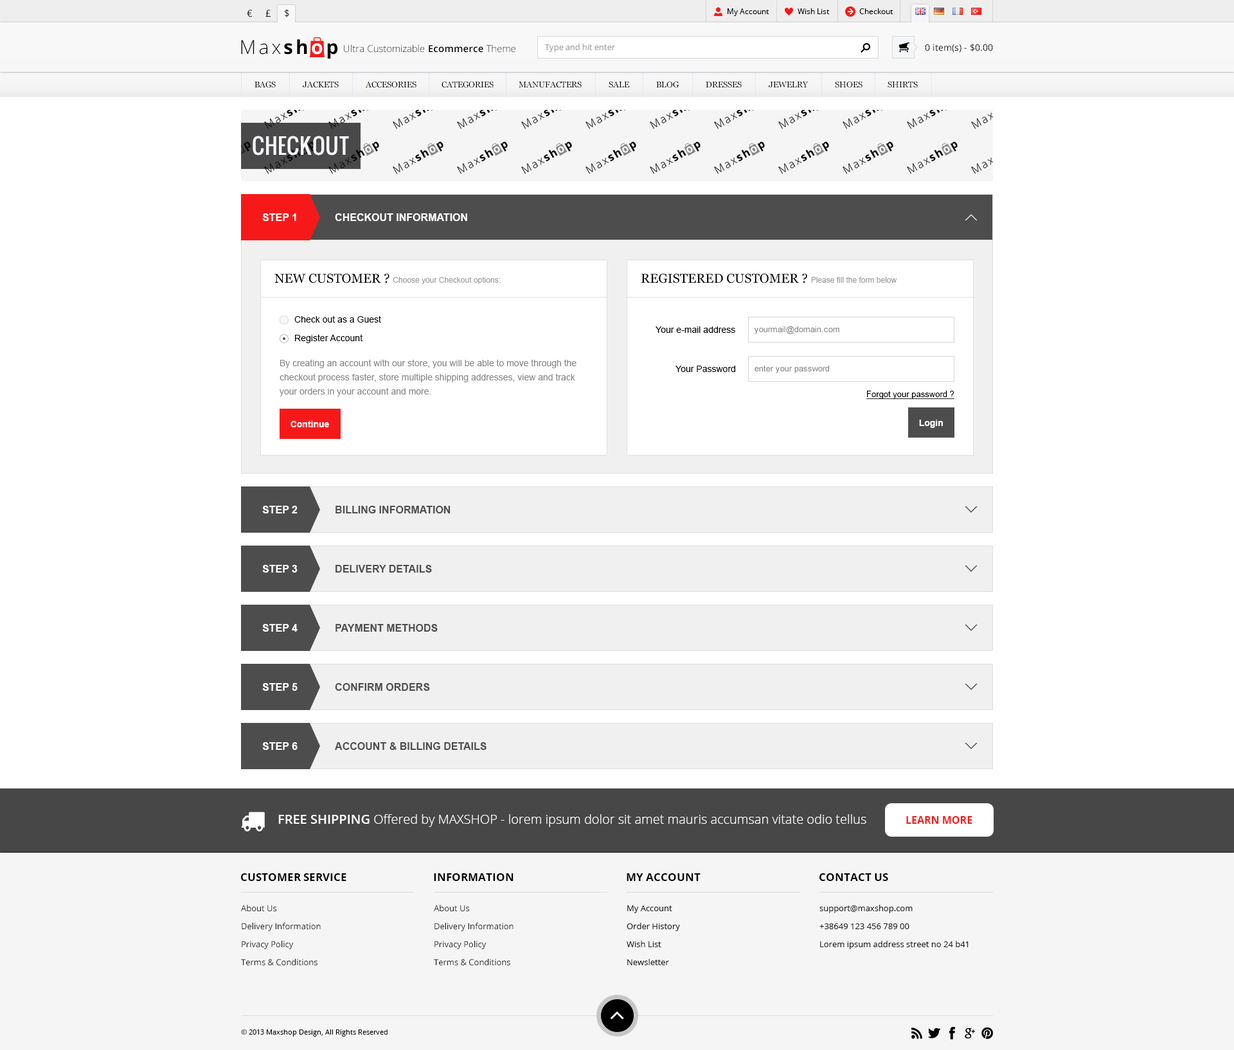
<style>
.page{position:relative;width:1234px;height:1050px;background:#ffffff}
.page>*{position:absolute;margin:0}
.t1{font:9.6px "OpenSans";color:#000000}
.t2{font:7.7px "OpenSans";color:#000000}
.t3{font:19.3px "OpenSans-Light";letter-spacing:0.14em;color:#000000}
.t4{font:19.3px "OpenSans-Bold";letter-spacing:0.14em;color:#000000}
.t5{font:19.3px "OpenSans-Bold";letter-spacing:0.14em;color:#f6f6fa}
.t6{font:9.6px "OpenSans-Light";color:#000000}
.t7{font:9.6px "OpenSans-Semibold";color:#000000}
.t8{font:8.4px "OpenSans";color:#a2a2a2}
.t9{font:9px "OpenSans";color:#000000}
.t10{font:8.4px "Georgia";color:#000000;text-transform:uppercase}
.t11{font:21.2px "Oswald";color:#f5f6fb}
.t12{font:10.3px "Arial-BoldMT";color:#ffffff;text-transform:uppercase}
.t13{font:7.7px "ArialMT";color:#9d9d9d}
.t14{font:12.9px "Georgia";color:#000000;text-transform:uppercase}
.t15{font:9px "ArialMT";color:#000000}
.t16{font:8.4px "ArialMT";color:#808080}
.t17{font:9px/14.1px "ArialMT";color:#8a8a8a}
.t18{font:8.4px "ArialMT";color:#000000;text-decoration:underline}
.t19{font:9px "Arial-BoldMT";color:#ffffff}
.t20{font:10.3px "Arial-BoldMT";color:#4d4d4d;text-transform:uppercase}
.t21{font:12.9px "OpenSans-Light";color:#ffffff}
.t22{font:12.9px "OpenSans-Semibold";color:#ffffff}
.t23{font:10.3px "OpenSans-Bold";color:#f71919;text-transform:uppercase}
.t24{font:10.9px "OpenSans-Bold";color:#000000;text-transform:uppercase}
.t25{font:8.4px/18px "OpenSans";color:#1c1c1c}
.t26{font:7.1px "OpenSans";color:#000000}
</style>
<div class="page">
<p class="t1" style="left:247px;top:9px;width:42px;height:8px">€     £     $</p>
<p class="t2" style="left:728px;top:8px;width:41px;height:8px">My Account</p>
<p class="t2" style="left:798px;top:8px;width:32px;height:6px">Wish List</p>
<p class="t2" style="left:859px;top:8px;width:35px;height:6px">Checkout</p>
<p class="t3" style="left:241px;top:39px;width:97px;height:20px">Max<span class="t4">sh</span><span class="t5">o</span><span class="t4">p</span></p>
<p class="t6" style="left:344px;top:44px;width:172px;height:9px">Ultra Customizable <span class="t7">Ecommerce</span> Theme</p>
<p class="t8" style="left:544px;top:44px;width:71px;height:8px">Type and hit enter</p>
<p class="t9" style="left:925px;top:44px;width:68px;height:9px">0 item(s) - $0.00</p>
<p class="t10" style="left:255px;top:81px;width:663px;height:7px">BAGS              Jackets              ACCESORIES             CATEGORIES             Manufacters              Sale              Blog              Dresses              Jewelry              SHOES             SHirts</p>
<p class="t11" style="left:253px;top:136px;width:96px;height:20px">CHECKOUT</p>
<p class="t12" style="left:262px;top:213px;width:34px;height:8px">sTEP 1</p>
<p class="t12" style="left:335px;top:213px;width:132px;height:8px">cHECKOUT iNFORMATION</p>
<p class="t13" style="left:274px;top:273px;width:227px;height:11px"><span class="t14">New Customer ? </span>Choose your Checkout options:</p>
<p class="t13" style="left:642px;top:273px;width:255px;height:10px"><span class="t14">Registered Customer ? </span>Please fill the form below</p>
<p class="t15" style="left:294px;top:316px;width:87px;height:7px">Check out as a Guest</p>
<p class="t15" style="left:656px;top:327px;width:79px;height:6px">Your e-mail address</p>
<p class="t16" style="left:754px;top:326px;width:86px;height:8px">yourmail@domain.com</p>
<p class="t15" style="left:295px;top:334px;width:68px;height:9px">Register Account</p>
<p class="t17" style="left:279px;top:359px;width:298px;height:38px">By creating an account with our store, you will be able to move through the checkout process faster, store multiple shipping addresses, view and track your orders in your account and more.</p>
<p class="t15" style="left:676px;top:366px;width:59px;height:6px">Your Password</p>
<p class="t16" style="left:755px;top:365px;width:74px;height:8px">enter your password</p>
<p class="t18" style="left:867px;top:391px;width:88px;height:8px">Forgot your password ?</p>
<p class="t19" style="left:291px;top:421px;width:38px;height:6px">Continue</p>
<p class="t19" style="left:919px;top:420px;width:24px;height:8px">Login</p>
<p class="t12" style="left:262px;top:506px;width:36px;height:8px">sTEP 2</p>
<p class="t20" style="left:336px;top:506px;width:115px;height:8px">Billing Information</p>
<p class="t12" style="left:262px;top:565px;width:36px;height:8px">sTEP 3</p>
<p class="t20" style="left:336px;top:565px;width:96px;height:8px">Delivery Details</p>
<p class="t12" style="left:262px;top:624px;width:36px;height:8px">sTEP 4</p>
<p class="t20" style="left:336px;top:624px;width:102px;height:8px">Payment Methods</p>
<p class="t12" style="left:262px;top:683px;width:36px;height:8px">sTEP 5</p>
<p class="t20" style="left:335px;top:683px;width:95px;height:8px">Confirm Orders</p>
<p class="t12" style="left:262px;top:742px;width:36px;height:8px">sTEP 6</p>
<p class="t20" style="left:335px;top:742px;width:152px;height:8px">Account &amp; Billing Details</p>
<p class="t21" style="left:278px;top:814px;width:589px;height:13px"><span class="t22">FREE SHIPPING </span>Offered by MAXSHOP - lorem ipsum dolor sit amet mauris accumsan vitate odio tellus</p>
<p class="t23" style="left:906px;top:816px;width:67px;height:8px">Learn more</p>
<p class="t24" style="left:241px;top:874px;width:105px;height:7px">Customer Service</p>
<p class="t24" style="left:434px;top:874px;width:80px;height:7px">Information</p>
<p class="t24" style="left:627px;top:874px;width:74px;height:7px">My Account</p>
<p class="t24" style="left:820px;top:874px;width:68px;height:7px">Contact us</p>
<p class="t25" style="left:241px;top:905px;width:80px;height:61px">About Us<br>Delivery Information<br>Privacy Policy<br>Terms &amp; Conditions</p>
<p class="t25" style="left:434px;top:905px;width:80px;height:61px">About Us<br>Delivery Information<br>Privacy Policy<br>Terms &amp; Conditions</p>
<p class="t25" style="left:627px;top:906px;width:53px;height:60px">My Account<br>Order History<br>Wish List<br>Newsletter</p>
<p class="t25" style="left:820px;top:905px;width:149px;height:44px">support@maxshop.com<br>+38649 123 456 789 00<br>Lorem ipsum address street no 24 b41</p>
<p class="t26" style="left:241px;top:1030px;width:147px;height:7px">© 2013 Maxshop Design, All Rights Reserved</p>
</div>
